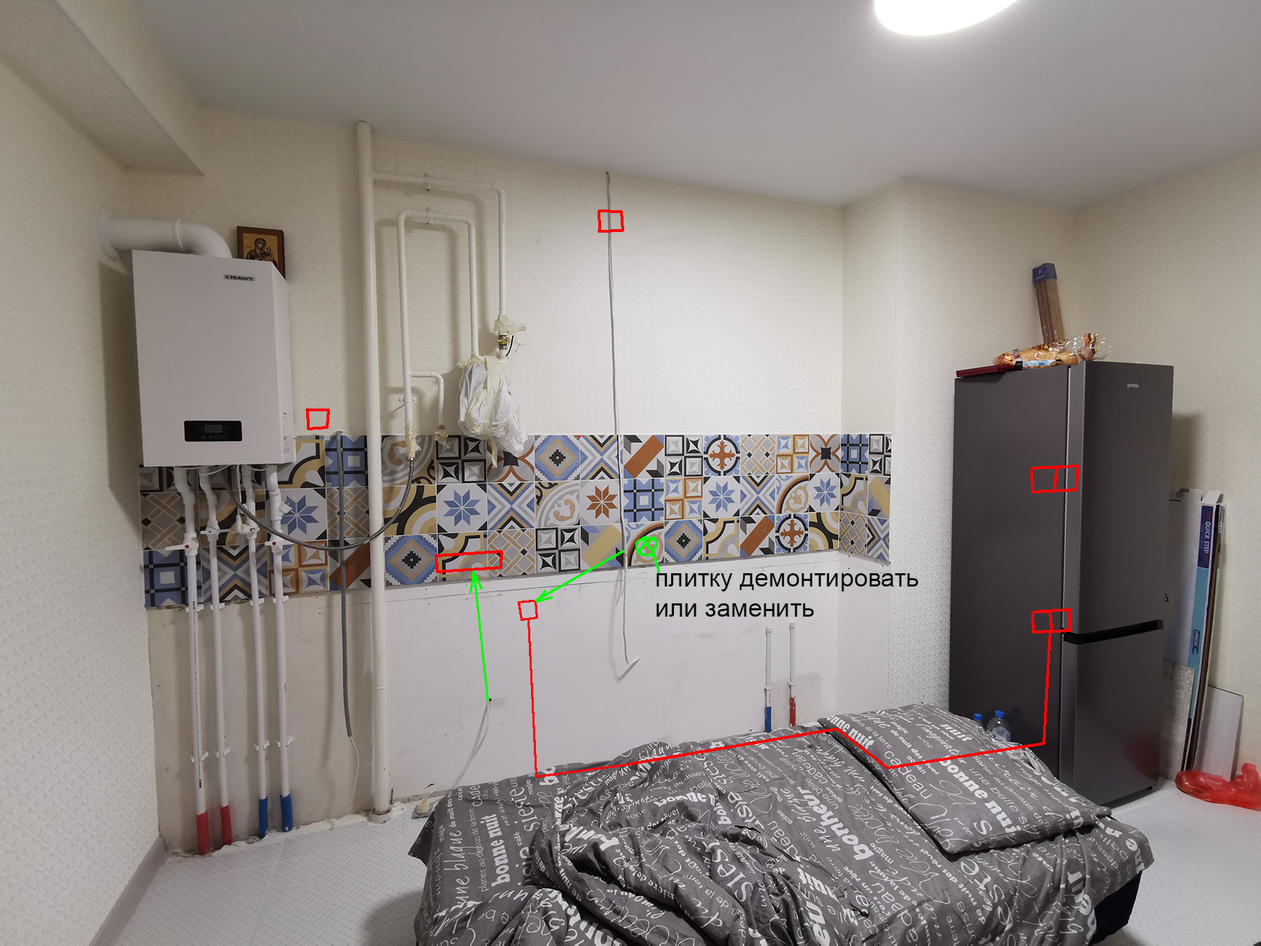
<style>
.page{position:relative;width:1261px;height:946px}
.page>*{position:absolute;margin:0}
.t1{font:25.2px "ArialMT";color:#080808}
</style>
<div class="page">
<p class="t1" style="left:656px;top:573px;width:262px;height:43px">плитку демонтировать <br>или заменить</p>
</div>
